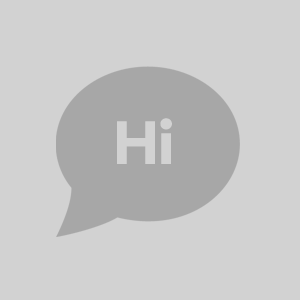
<style>
.page{position:relative;width:300px;height:300px;background:#d2d2d2}
.page>*{position:absolute;margin:0}
.t1{font:65px "BlissPro-Heavy";letter-spacing:-0.025em;color:#e9e9e9}
</style>
<div class="page">
<p class="t1" style="left:117px;top:118px;width:55px;height:46px">Hi</p>
</div>
